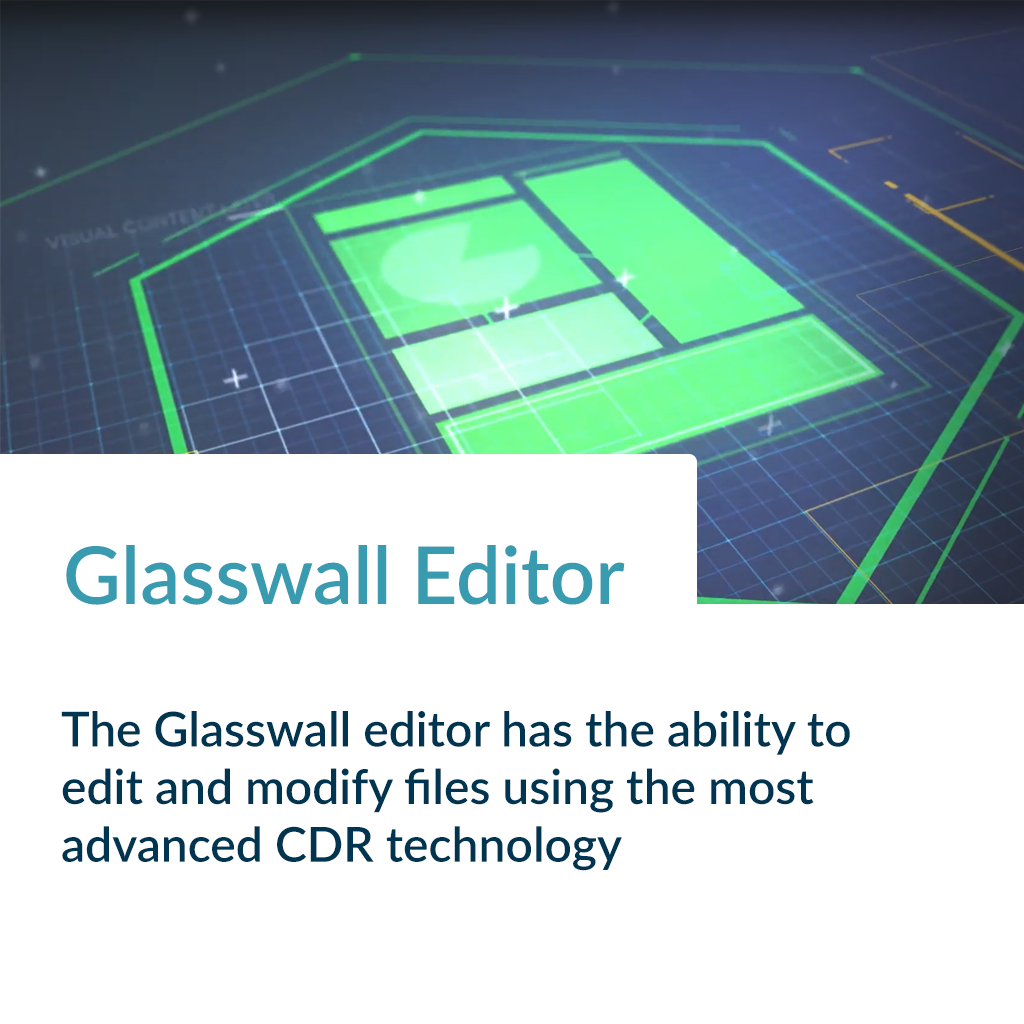
<style>
.page{position:relative;width:1024px;height:1024px;background:#ffffff}
.page>*{position:absolute;margin:0}
.t1{font:79.8px "Lato-Semibold";color:#399baf}
.t2{font:48px "Lato-Semibold";color:#003552}
</style>
<div class="page">
<p class="t1" style="left:66px;top:545px;width:559px;height:60px">Glasswall Editor</p>
<p class="t2" style="left:61px;top:711px;width:789px;height:160px">The Glasswall editor has the ability to edit and modify files using the most advanced CDR technology</p>
</div>
